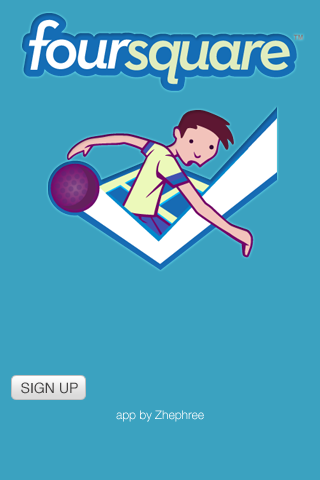
<style>
.page{position:relative;width:320px;height:480px;background:#3ba2c0}
.page>*{position:absolute;margin:0}
.t1{font:14px "Helvetica";color:#444343}
.t2{font:12px "HelveticaNeueLTPro-Lt";color:#ffffff}
</style>
<div class="page">
<p class="t1" style="left:21px;top:382px;width:57px;height:12px">SIGN UP</p>
<p class="t2" style="left:116px;top:410px;width:88px;height:12px">app by Zhephree</p>
</div>
